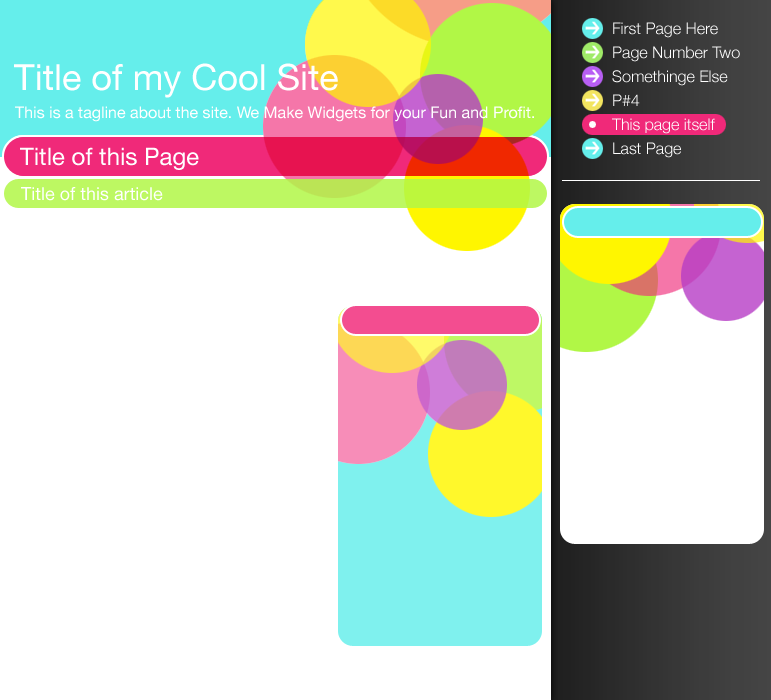
<style>
.page{position:relative;width:771px;height:700px;background:#ffffff}
.page>*{position:absolute;margin:0}
.t1{font:16px/12px "HelveticaNeue-Light";color:#ffffff}
.t2{font:36px "HelveticaNeue";color:#ffffff}
.t3{font:16px "HelveticaNeue";color:#ffffff}
.t4{font:24px "HelveticaNeue";color:#ffffff}
.t5{font:18px "HelveticaNeue";color:#ffffff}
</style>
<div class="page">
<p class="t1" style="left:612px;top:22px;width:128px;height:136px">First Page Here<br> <br>Page Number Two<br> <br>Somethinge Else<br> <br>P#4<br> <br>This page itself<br> <br>Last Page</p>
<p class="t2" style="left:14px;top:63px;width:324px;height:35px">Title of my Cool Site</p>
<p class="t3" style="left:15px;top:106px;width:519px;height:16px">This is a tagline about the site. We Make Widgets for your Fun and Profit.</p>
<p class="t4" style="left:20px;top:147px;width:179px;height:23px">Title of this Page</p>
<p class="t5" style="left:21px;top:187px;width:142px;height:14px">Title of this article</p>
</div>
